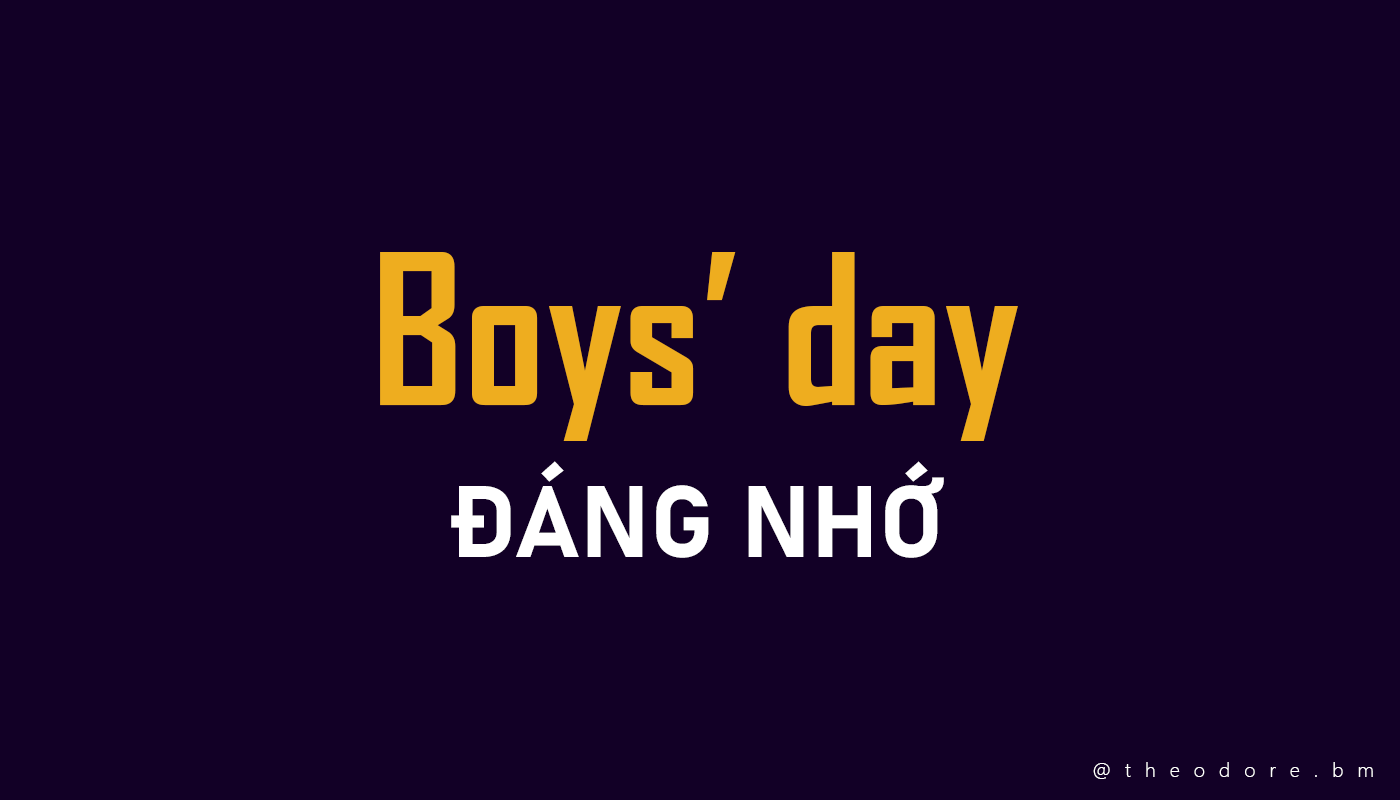
<style>
.page{position:relative;width:1400px;height:800px;background:#120026}
.page>*{position:absolute;margin:0}
.t1{font:200px "SVN-AgencyFBbold";color:#eead1f}
.t2{font:100px "Bahnschrift-Bold";color:#ffffff}
.t3{font:20px "SegoeUI-Light";letter-spacing:0.7em;color:#ffffff}
</style>
<div class="page">
<p class="t1" style="left:380px;top:252px;width:638px;height:189px">Boys’ day</p>
<p class="t2" style="left:451px;top:461px;width:493px;height:97px">ĐÁNG NHỚ</p>
<p class="t3" style="left:1093px;top:762px;width:280px;height:17px">@theodore.bm</p>
</div>
